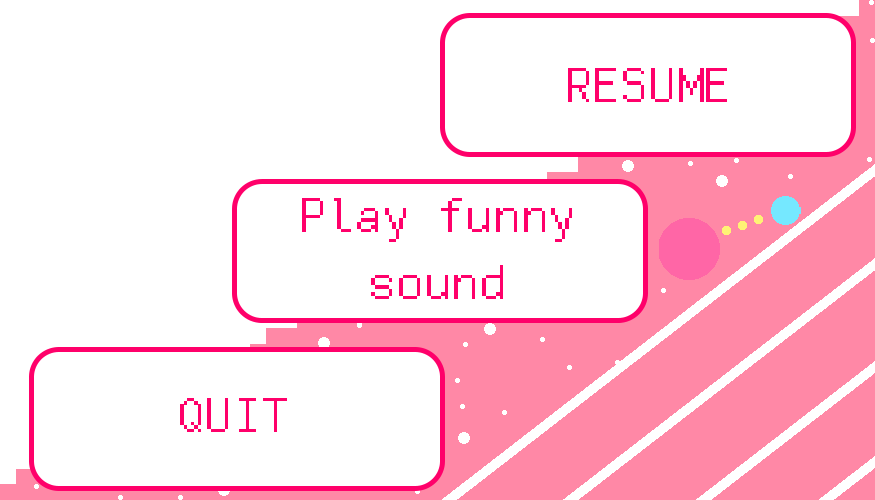
<style>
.page{position:relative;width:875px;height:500px;background:#ffffff}
.page>*{position:absolute;margin:0}
.t1{font:55.3px "FreePixel-Regular";color:#ff006a}
</style>
<div class="page">
<p class="t1" style="left:568px;top:68px;width:159px;height:34px">RESUME</p>
<p class="t1" style="left:302px;top:198px;width:270px;height:101px;text-align:center">Play funny<br>sound</p>
<p class="t1" style="left:180px;top:398px;width:107px;height:34px">QUIT</p>
</div>
